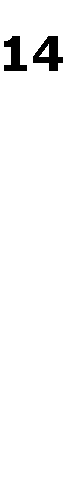
<style>
.page{position:relative;width:64px;height:500px;background:#ffffff}
.page>*{position:absolute;margin:0}
.t1{font:48px "Verdana-Bold";color:#000000}
</style>
<div class="page">
<p class="t1" style="left:4px;top:36px;width:59px;height:35px">14</p>
</div>
